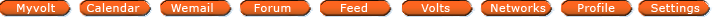
<style>
.page{position:relative;width:714px;height:17px}
.page>*{position:absolute;margin:0}
.t1{font:11px "Verdana";letter-spacing:0.05em;color:#ffffff}
</style>
<div class="page">
<p class="t1" style="left:17px;top:3px;width:683px;height:11px">Myvolt       Calendar       Wemail         Forum           Feed            Volts         Networks       Profile        Settings</p>
</div>
